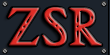
<style>
.page{position:relative;width:110px;height:55px;background:#1c232c}
.page>*{position:absolute;margin:0}
.t1{font:42px "Triforce";letter-spacing:0.1em;font-weight:bold}
</style>
<div class="page">
<p class="t1" style="left:8px;top:7px;width:94px;height:39px">ZSR</p>
</div>
